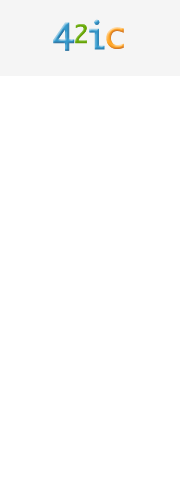
<style>
.page{position:relative;width:180px;height:500px;background:#ffffff}
.page>*{position:absolute;margin:0}
.t1{font:36px "MicrosoftYaHei";font-weight:bold}
.t2{font:24px "MicrosoftYaHei";color:#66ab05;font-weight:bold}
.t3{font:36px "MicrosoftYaHei";color:#3399cc;font-weight:bold}
</style>
<div class="page">
<p class="t1" style="left:53px;top:22px;width:22px;height:29px">4</p>
<p class="t2" style="left:75px;top:24px;width:12px;height:20px">2</p>
<p class="t3" style="left:89px;top:19px;width:16px;height:31px">i</p>
<p class="t1" style="left:106px;top:27px;width:18px;height:22px">c</p>
</div>
